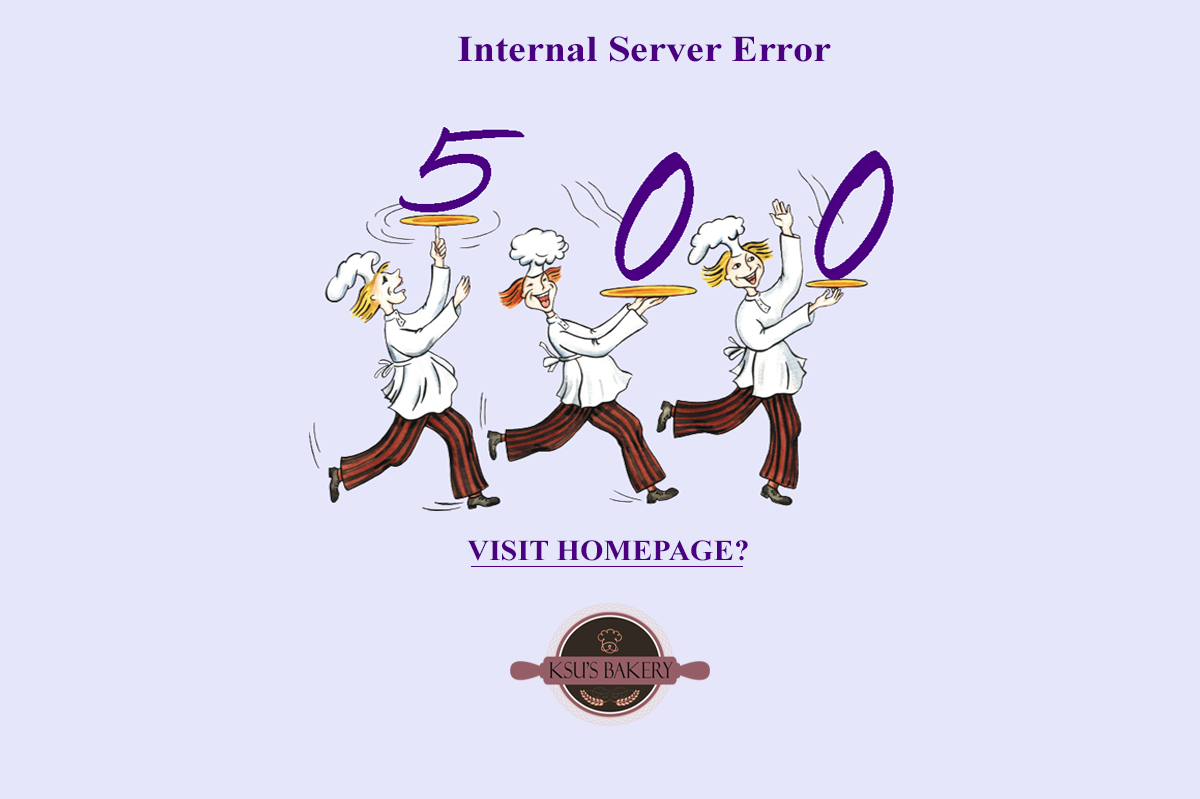
<style>
.page{position:relative;width:1200px;height:799px;background:#e6e6fa}
.page>*{position:absolute;margin:0}
.t1{font:36.5px "TimesNewRomanPS-BoldMT";color:#4b0082;scale:1.1 1}
.t2{font:29.3px "TimesNewRomanPS-BoldMT";color:#4b0082;scale:1.03 1}
</style>
<div class="page">
<p class="t1" style="left:458px;top:36px;width:373px;height:26px">Internal Server Error</p>
<p class="t2" style="left:467px;top:540px;width:281px;height:21px">VISIT HOMEPAGE?</p>
</div>
